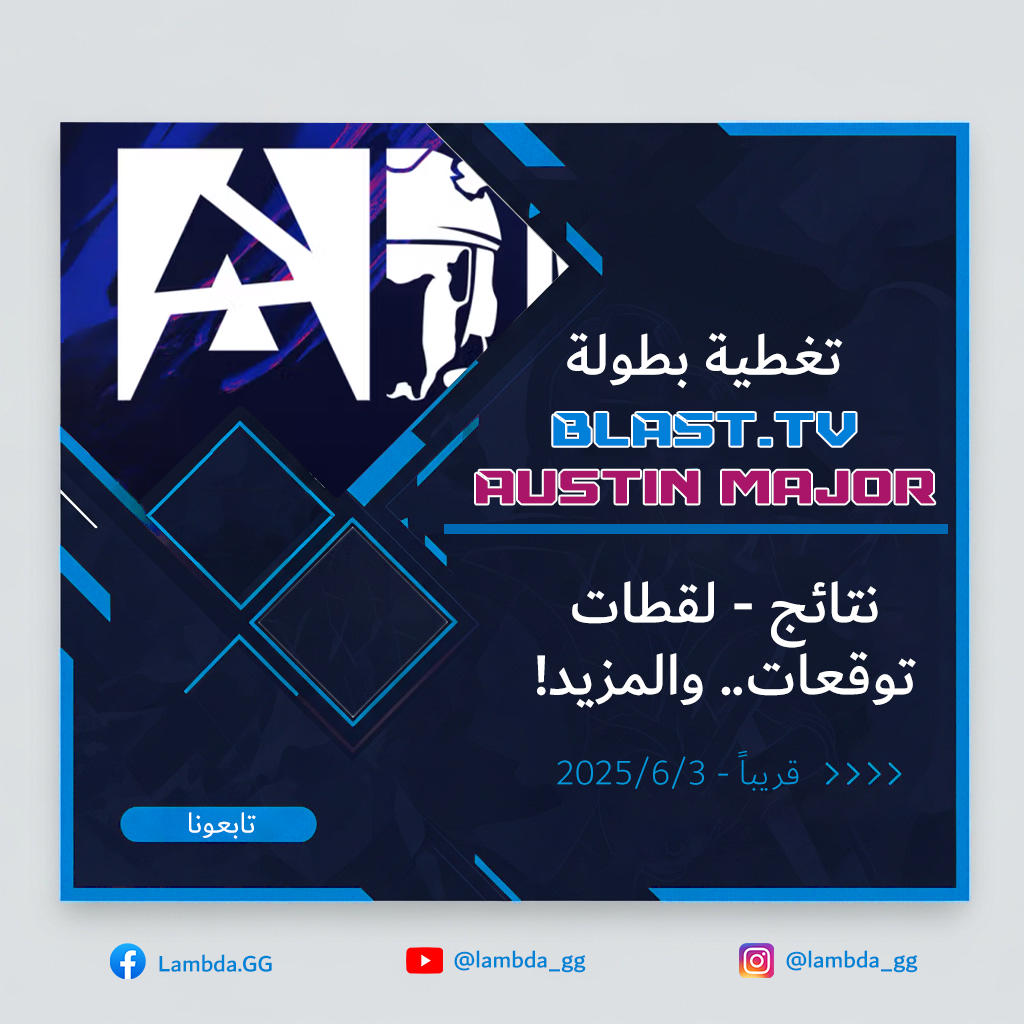
<style>
.page{position:relative;width:1024px;height:1024px}
.page>*{position:absolute;margin:0}
.t1{font:60px "Dubai-Medium";color:#ffffff}
.t2{font:48px "Mechfire";color:#a91569}
.t3{font:48px "Dubai-Medium";color:#ffffff}
.t4{font:48px "Mechfire";color:#0080d9}
.t5{font:36px "Dubai-Light";color:#0097db}
.t6{font:30px "Dubai-Regular";color:#ffffff}
.t7{font:24px "Dubai-Medium";color:#0082d5}
</style>
<div class="page">
<p class="t1" style="left:567px;top:333px;width:276px;height:56px">تغطية بطولة</p>
<p class="t2" style="left:476px;top:413px;width:459px;height:91px;text-align:center"><span class="t3"><br></span><span class="t4">BLAST.TV<br></span>Austin Major</p>
<p class="t1" style="left:537px;top:581px;width:379px;height:127px;text-align:center">نتائج - لقطات<br>توقعات.. والمزيد!</p>
<p class="t5" style="left:557px;top:750px;width:242px;height:41px">قريباً - 3/6/2025</p>
<p class="t6" style="left:189px;top:812px;width:67px;height:27px">تابعونا</p>
<p class="t7" style="left:454px;top:950px;width:132px;height:23px">lambda_gg@</p>
<p class="t7" style="left:786px;top:950px;width:132px;height:23px">lambda_gg@</p>
<p class="t7" style="left:159px;top:954px;width:113px;height:18px">Lambda.GG</p>
</div>
